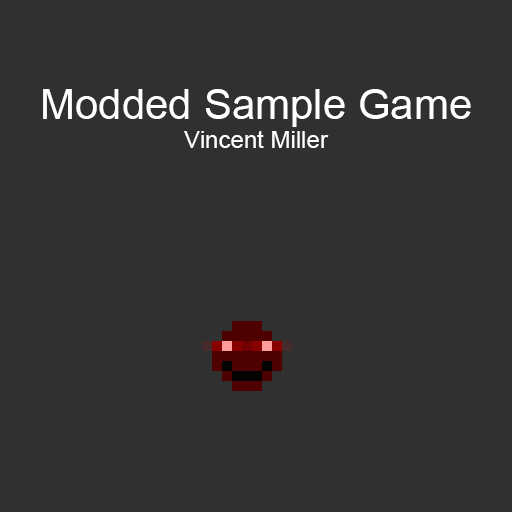
<style>
.page{position:relative;width:512px;height:512px;background:#303030}
.page>*{position:absolute;margin:0}
.t1{font:42px "ArialMT";color:#ffffff}
.t2{font:24px "ArialMT";color:#ffffff}
</style>
<div class="page">
<p class="t1" style="left:43px;top:89px;width:428px;height:59px;text-align:center">Modded Sample Game<br><span class="t2">Vincent Miller</span></p>
</div>
